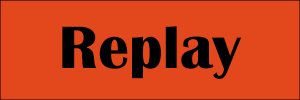
<style>
.page{position:relative;width:300px;height:100px;background:#e3471c}
.page>*{position:absolute;margin:0}
.t1{font:62.1px "BritannicBold";color:#000000}
</style>
<div class="page">
<p class="t1" style="left:62px;top:26px;width:180px;height:53px">Replay</p>
</div>
